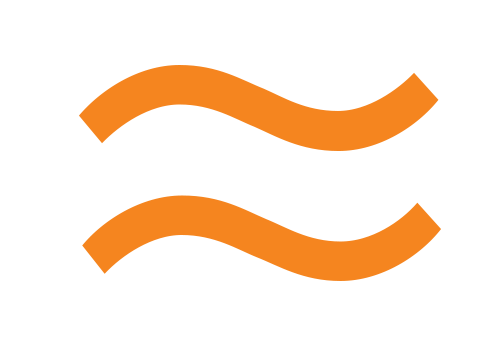
<style>
.page{position:relative;width:504px;height:360px;background:#ffffff}
.page>*{position:absolute;margin:0}
.t1{font:657px "MyriadPro-Regular";color:#f6861f}
</style>
<div class="page">
<p class="t1" style="left:79px;top:65px;width:362px;height:216px">≈</p>
</div>
